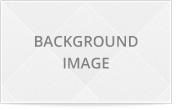
<style>
.page{position:relative;width:180px;height:110px}
.page>*{position:absolute;margin:0}
.t1{font:15px/21.8px "OpenSans-Semibold";color:#818181}
</style>
<div class="page">
<p class="t1" style="left:35px;top:36px;width:103px;height:33px;text-align:center">BACKGROUND<br>IMAGE</p>
</div>
